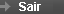
<style>
.page{position:relative;width:64px;height:14px}
.page>*{position:absolute;margin:0}
.t1{font:12px "Arial-BoldMT";color:#ffffff}
</style>
<div class="page">
<p class="t1" style="left:19px;top:2px;width:22px;height:9px">Sair</p>
</div>
